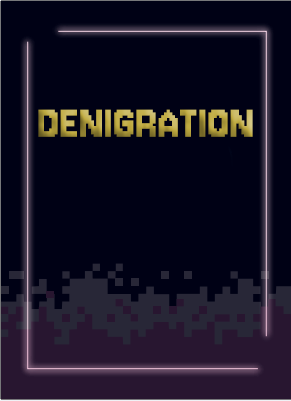
<style>
.page{position:relative;width:291px;height:401px;background:#000115}
.page>*{position:absolute;margin:0}
.t1{font:50px "Jersey10-Regular";letter-spacing:0.025em}
</style>
<div class="page">
<p class="t1" style="left:38px;top:109px;width:215px;height:28px">DENIGRATION</p>
</div>
